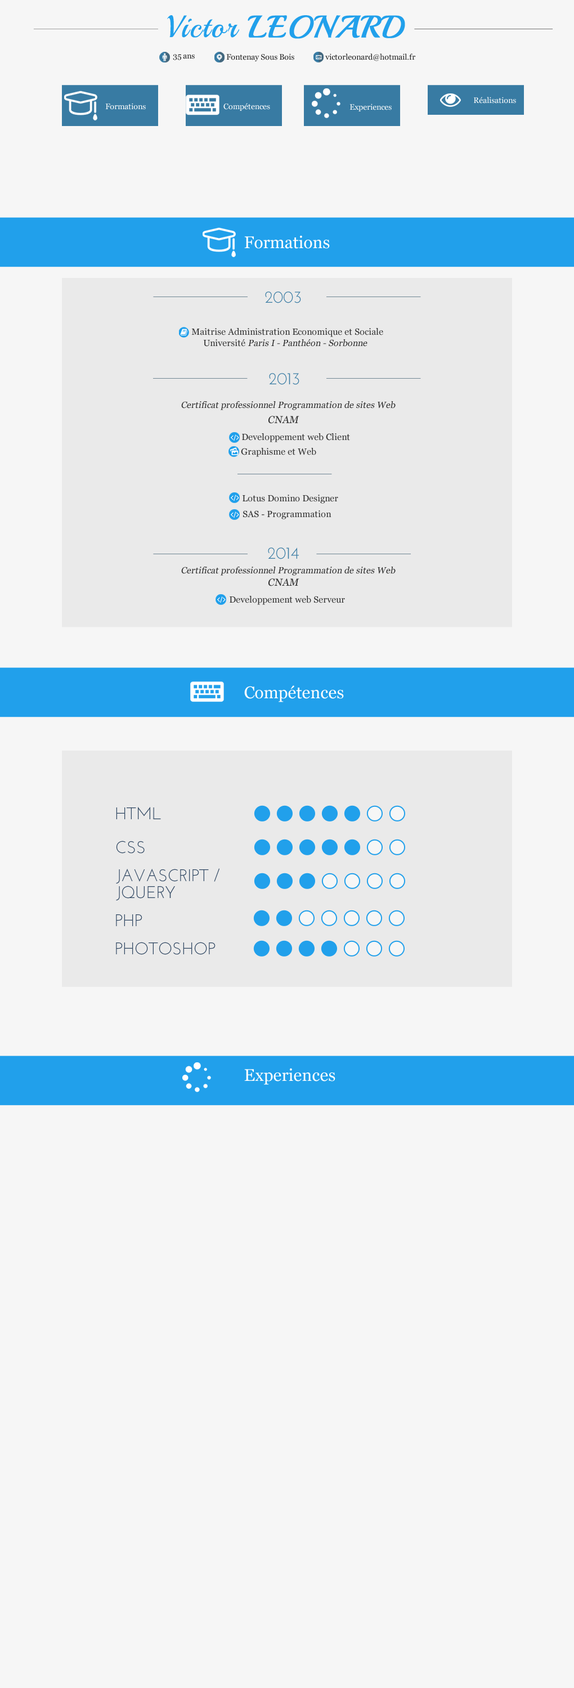
<style>
.page{position:relative;width:574px;height:1688px;background:#f6f6f6}
.page>*{position:absolute;margin:0}
.t1{font:30.9px "Playball-Regular";letter-spacing:0.04em;color:#21a0eb;font-weight:bold}
.t2{font:30.9px "Playball-Regular";letter-spacing:0.04em;color:#21a0eb}
.t3{font:7.9px "Vani";color:#212121}
.t4{font:7.9px "Vani";color:#ffffff}
.t5{font:16.9px "Vani";color:#ffffff}
.t6{font:16.9px "JosefinSans";color:#387ba3}
.t7{font:9px "Vani";color:#303030}
.t8{font:9px "Vani";color:#303030;font-style:italic}
.t9{font:10.1px "Vani";color:#303030;font-style:italic}
.t10{font:16.9px "JosefinSans";color:#304762}
.t11{font:16.9px/16.9px "JosefinSans";color:#304762}
</style>
<div class="page">
<p class="t1" style="left:167px;top:15px;width:238px;height:24px"><span class="t2">Victor </span>LEONARD</p>
<p class="t3" style="left:173px;top:54px;width:22px;height:6px">35 ans</p>
<p class="t3" style="left:226px;top:53px;width:68px;height:8px">Fontenay Sous Bois</p>
<p class="t3" style="left:325px;top:53px;width:90px;height:8px">victorleonard@hotmail.fr</p>
<p class="t4" style="left:474px;top:97px;width:42px;height:7px">Réalisations</p>
<p class="t4" style="left:105px;top:103px;width:41px;height:7px">Formations</p>
<p class="t4" style="left:223px;top:103px;width:47px;height:8px">Compétences</p>
<p class="t4" style="left:349px;top:104px;width:43px;height:7px">Experiences</p>
<p class="t5" style="left:244px;top:235px;width:86px;height:14px">Formations</p>
<p class="t6" style="left:265px;top:291px;width:36px;height:12px">2003</p>
<p class="t7" style="left:191px;top:328px;width:192px;height:9px">Maitrise Administration Economique et Sociale</p>
<p class="t8" style="left:203px;top:339px;width:164px;height:7px"><span class="t7">Université </span>Paris I - Panthéon - Sorbonne</p>
<p class="t6" style="left:269px;top:373px;width:30px;height:12px">2013</p>
<p class="t8" style="left:181px;top:401px;width:214px;height:9px">Certificat professionnel Programmation de sites Web</p>
<p class="t9" style="left:268px;top:416px;width:31px;height:8px">CNAM</p>
<p class="t7" style="left:242px;top:433px;width:108px;height:9px">Developpement web Client</p>
<p class="t7" style="left:241px;top:448px;width:75px;height:9px">Graphisme et Web</p>
<p class="t7" style="left:242px;top:494px;width:96px;height:9px">Lotus Domino Designer</p>
<p class="t7" style="left:243px;top:510px;width:88px;height:9px">SAS - Programmation</p>
<p class="t6" style="left:268px;top:547px;width:31px;height:12px">2014</p>
<p class="t8" style="left:181px;top:566px;width:214px;height:9px">Certificat professionnel Programmation de sites Web</p>
<p class="t9" style="left:268px;top:578px;width:31px;height:8px">CNAM</p>
<p class="t7" style="left:230px;top:596px;width:115px;height:9px">Developpement web Serveur</p>
<p class="t5" style="left:244px;top:685px;width:100px;height:17px">Compétences</p>
<p class="t10" style="left:116px;top:807px;width:45px;height:12px">HTML</p>
<p class="t10" style="left:116px;top:840px;width:29px;height:13px">CSS</p>
<p class="t11" style="left:116px;top:868px;width:103px;height:33px">JAVASCRIPT / <br>JQUERY</p>
<p class="t10" style="left:116px;top:914px;width:26px;height:12px">PHP</p>
<p class="t10" style="left:116px;top:942px;width:99px;height:13px">PHOTOSHOP</p>
<p class="t5" style="left:244px;top:1068px;width:91px;height:16px">Experiences</p>
</div>
